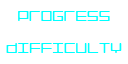
<style>
.page{position:relative;width:128px;height:64px;background:#ffffff}
.page>*{position:absolute;margin:0}
.t1{font:18px "LuggageRoundLight";color:#00ffff}
</style>
<div class="page">
<p class="t1" style="left:18px;top:11px;width:92px;height:10px">PROGRESS</p>
<p class="t1" style="left:6px;top:43px;width:116px;height:10px">DIFFICULTY</p>
</div>
